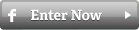
<style>
.page{position:relative;width:139px;height:30px}
.page>*{position:absolute;margin:0}
.t1{font:14px "Adelle-Bold";color:#ffffff}
</style>
<div class="page">
<p class="t1" style="left:31px;top:9px;width:71px;height:12px">Enter Now</p>
</div>
